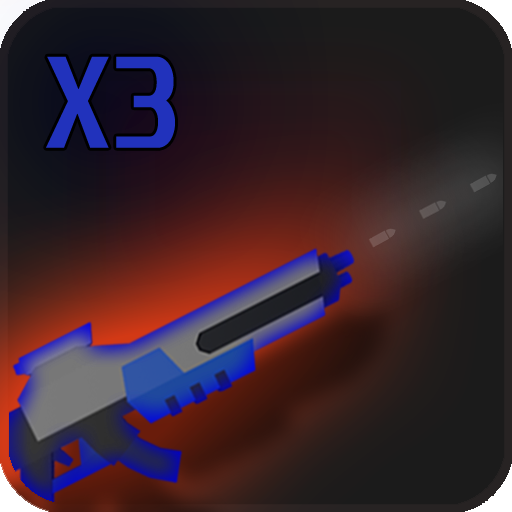
<style>
.page{position:relative;width:512px;height:512px}
.page>*{position:absolute;margin:0}
.t1{font:112.5px "Unispace-Bold";color:#2132bc}
</style>
<div class="page">
<p class="t1" style="left:46px;top:56px;width:129px;height:92px">X3</p>
</div>
